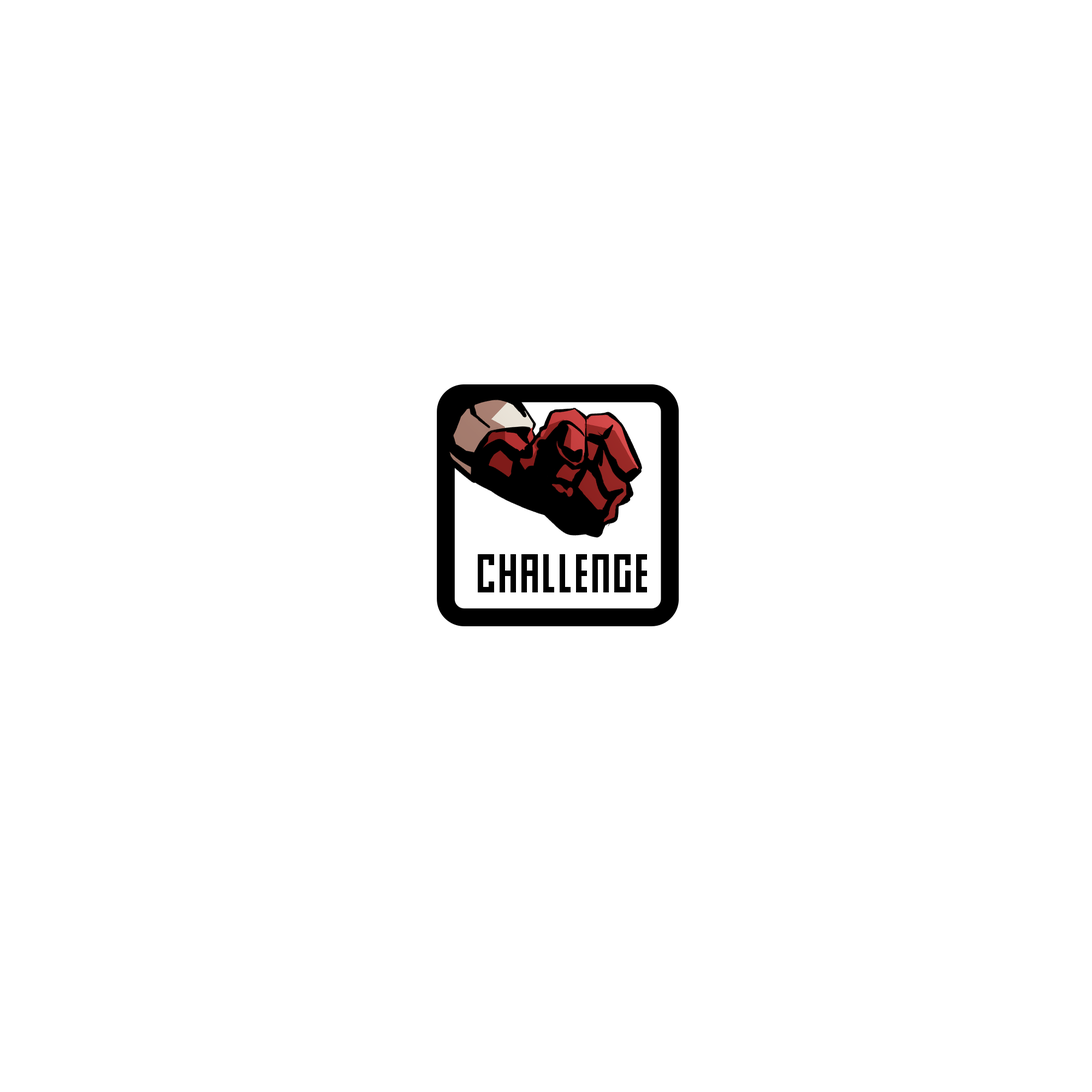
<style>
.page{position:relative;width:1092px;height:1092px;background:#ffffff}
.page>*{position:absolute;margin:0}
.t1{font:54.6px "pxl";color:#000000}
</style>
<div class="page">
<p class="t1" style="left:478px;top:554px;width:169px;height:38px">CHALLENGE</p>
</div>
